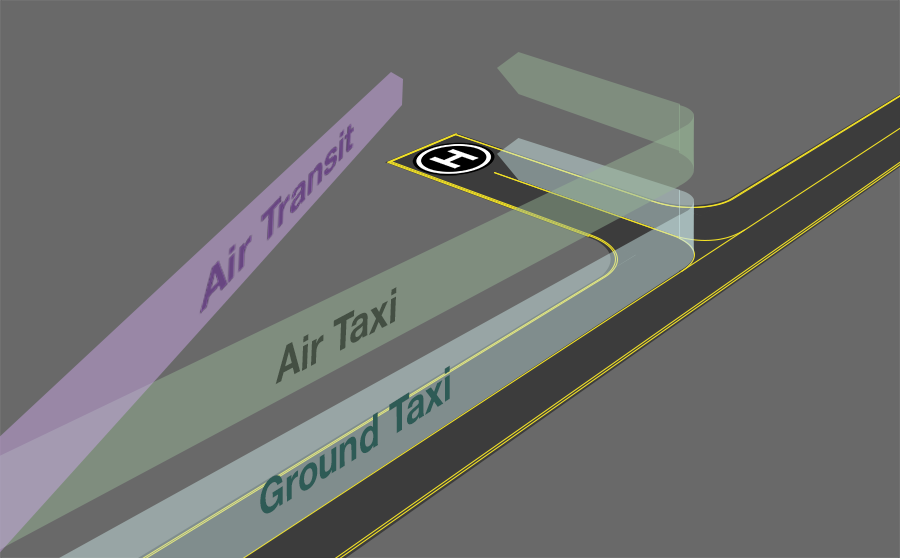
<style>
.page{position:relative;width:900px;height:558px;background:#696969}
.page>*{position:absolute;margin:0}
.t1{font:48px "HelveticaNeue-Bold";color:#444f43;scale:0.82 1}
.t2{font:46.5px "HelveticaNeue-Bold";color:#2e5b56;scale:0.86 1}
</style>
<div class="page">
<p class="t1" style="left:275px;top:287px;width:122px;height:98px;rotate:-28deg">Air Taxi</p>
<p class="t2" style="left:260px;top:365px;width:190px;height:149px;rotate:-32deg">Ground Taxi</p>
</div>
